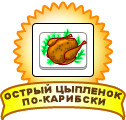
<style>
.page{position:relative;width:126px;height:120px;background:#ffffff}
.page>*{position:absolute;margin:0}
.t1{font:9px/9.4px "Arial-Black";letter-spacing:-0.025em;color:#5b3714;text-transform:uppercase}
.t2{font:9px/9.4px "Arial-Black";letter-spacing:0.045em;color:#5b3714;text-transform:uppercase}
</style>
<div class="page">
<p class="t1" style="left:4px;top:84px;width:118px;height:22px;text-align:center">острый Цыпленок<span class="t2"> <br>по-карибски</span></p>
</div>
